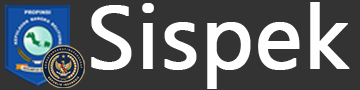
<style>
.page{position:relative;width:360px;height:90px;background:#333333}
.page>*{position:absolute;margin:0}
.t1{font:88.9px "Ebrima";color:#fefefe;font-weight:bold}
</style>
<div class="page">
<p class="t1" style="left:91px;top:2px;width:259px;height:87px">Sispek</p>
</div>
